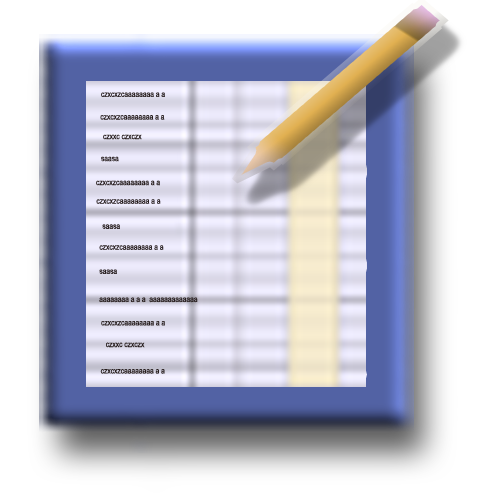
<style>
.page{position:relative;width:500px;height:500px;background:#ffffff}
.page>*{position:absolute;margin:0}
.t1{font:8.2px "ArialNarrow";color:#271e1e}
.t2{font:8.2px "ArialNarrow";color:#322a2b}
</style>
<div class="page">
<p class="t1" style="left:101px;top:92px;width:64px;height:5px">czxcxzcaaaaaaaa a a</p>
<p class="t1" style="left:100px;top:115px;width:65px;height:5px">czxcxzcaaaaaaaa a a</p>
<p class="t1" style="left:103px;top:134px;width:39px;height:6px">czxxc czxczx</p>
<p class="t2" style="left:101px;top:156px;width:18px;height:6px">saasa</p>
<p class="t1" style="left:96px;top:180px;width:64px;height:6px">czxcxzcaaaaaaaa a a</p>
<p class="t1" style="left:96px;top:199px;width:65px;height:5px">czxcxzcaaaaaaaa a a</p>
<p class="t1" style="left:102px;top:224px;width:18px;height:5px">saasa</p>
<p class="t1" style="left:99px;top:245px;width:65px;height:5px">czxcxzcaaaaaaaa a a</p>
<p class="t1" style="left:99px;top:269px;width:18px;height:5px">saasa</p>
<p class="t1" style="left:99px;top:297px;width:99px;height:6px">aaaaaaaa a a a  aaaaaaaaaaaaa</p>
<p class="t1" style="left:101px;top:321px;width:64px;height:5px">czxcxzcaaaaaaaa a a</p>
<p class="t1" style="left:106px;top:342px;width:39px;height:6px">czxxc czxczx</p>
<p class="t1" style="left:100px;top:369px;width:65px;height:5px">czxcxzcaaaaaaaa a a</p>
</div>
